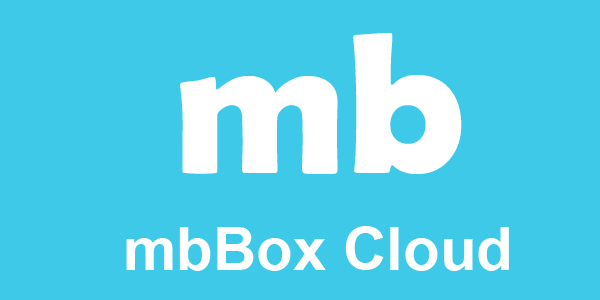
<style>
.page{position:relative;width:600px;height:300px;background:#3dc9e7}
.page>*{position:absolute;margin:0}
.t1{font:200px "BerlinSansFBDemi-Bold";color:#ffffff}
.t2{font:60px "Arial-BoldMT";color:#ffffff}
</style>
<div class="page">
<p class="t1" style="left:180px;top:33px;width:282px;height:141px">mb</p>
<p class="t2" style="left:126px;top:226px;width:383px;height:45px">mbBox Cloud</p>
</div>
